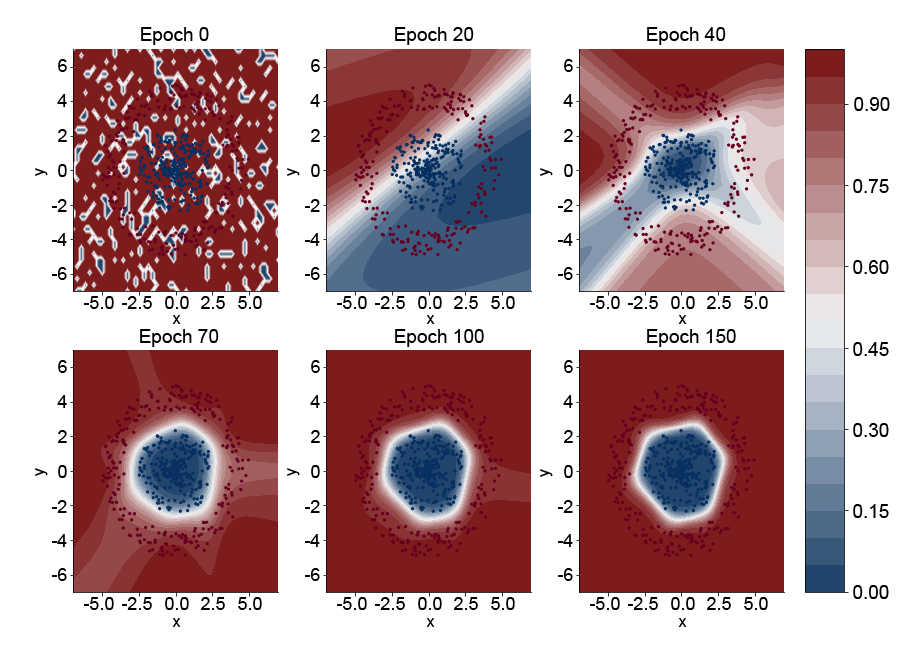
<style>
.page{position:relative;width:910px;height:657px;background:#ffffff}
.page>*{position:absolute;margin:0}
.t1{font:19px "ArialMT";color:#000000}
.t2{font:18px "ArialMT";color:#000000}
.t3{font:16px "ArialMT";color:#000000}
</style>
<div class="page">
<p class="t1" style="left:141px;top:27px;width:68px;height:18px">Epoch 0</p>
<p class="t1" style="left:395px;top:27px;width:79px;height:18px">Epoch 20</p>
<p class="t1" style="left:647px;top:27px;width:79px;height:18px">Epoch 40</p>
<p class="t2" style="left:58px;top:59px;width:9px;height:13px">6</p>
<p class="t2" style="left:311px;top:59px;width:9px;height:13px">6</p>
<p class="t2" style="left:564px;top:59px;width:9px;height:13px">6</p>
<p class="t2" style="left:57px;top:94px;width:10px;height:13px">4</p>
<p class="t2" style="left:310px;top:94px;width:10px;height:13px">4</p>
<p class="t2" style="left:563px;top:94px;width:10px;height:13px">4</p>
<p class="t1" style="left:854px;top:97px;width:36px;height:14px">0.90</p>
<p class="t2" style="left:58px;top:129px;width:9px;height:13px">2</p>
<p class="t2" style="left:311px;top:129px;width:9px;height:13px">2</p>
<p class="t2" style="left:564px;top:129px;width:9px;height:13px">2</p>
<p class="t3" style="left:35px;top:168px;width:13px;height:8px;rotate:-90deg">y</p>
<p class="t2" style="left:58px;top:164px;width:9px;height:13px">0</p>
<p class="t3" style="left:287px;top:168px;width:13px;height:8px;rotate:-90deg">y</p>
<p class="t2" style="left:311px;top:164px;width:9px;height:13px">0</p>
<p class="t3" style="left:540px;top:168px;width:13px;height:8px;rotate:-90deg">y</p>
<p class="t2" style="left:564px;top:164px;width:9px;height:13px">0</p>
<p class="t1" style="left:853px;top:179px;width:36px;height:14px">0.75</p>
<p class="t2" style="left:52px;top:199px;width:15px;height:13px">-2</p>
<p class="t2" style="left:305px;top:199px;width:15px;height:13px">-2</p>
<p class="t2" style="left:558px;top:199px;width:15px;height:13px">-2</p>
<p class="t2" style="left:52px;top:233px;width:15px;height:13px">-4</p>
<p class="t2" style="left:305px;top:233px;width:15px;height:13px">-4</p>
<p class="t2" style="left:558px;top:233px;width:15px;height:13px">-4</p>
<p class="t2" style="left:52px;top:267px;width:15px;height:13px">-6</p>
<p class="t2" style="left:305px;top:267px;width:15px;height:13px">-6</p>
<p class="t2" style="left:558px;top:267px;width:15px;height:13px">-6</p>
<p class="t1" style="left:853px;top:260px;width:36px;height:14px">0.60</p>
<p class="t2" style="left:84px;top:296px;width:30px;height:13px">-5.0</p>
<p class="t2" style="left:122px;top:296px;width:30px;height:13px">-2.5</p>
<p class="t2" style="left:165px;top:296px;width:24px;height:13px">0.0</p>
<p class="t2" style="left:201px;top:296px;width:24px;height:13px">2.5</p>
<p class="t2" style="left:238px;top:296px;width:24px;height:13px">5.0</p>
<p class="t2" style="left:337px;top:296px;width:30px;height:13px">-5.0</p>
<p class="t2" style="left:375px;top:296px;width:30px;height:13px">-2.5</p>
<p class="t2" style="left:418px;top:296px;width:24px;height:13px">0.0</p>
<p class="t2" style="left:454px;top:296px;width:24px;height:13px">2.5</p>
<p class="t2" style="left:491px;top:296px;width:24px;height:13px">5.0</p>
<p class="t2" style="left:590px;top:296px;width:30px;height:13px">-5.0</p>
<p class="t2" style="left:628px;top:296px;width:30px;height:13px">-2.5</p>
<p class="t2" style="left:671px;top:296px;width:24px;height:13px">0.0</p>
<p class="t2" style="left:707px;top:296px;width:24px;height:13px">2.5</p>
<p class="t2" style="left:744px;top:296px;width:24px;height:13px">5.0</p>
<p class="t3" style="left:172px;top:315px;width:9px;height:9px">x</p>
<p class="t3" style="left:426px;top:315px;width:9px;height:9px">x</p>
<p class="t3" style="left:678px;top:315px;width:9px;height:9px">x</p>
<p class="t1" style="left:140px;top:329px;width:79px;height:18px">Epoch 70</p>
<p class="t1" style="left:395px;top:329px;width:89px;height:18px">Epoch 100</p>
<p class="t1" style="left:647px;top:329px;width:89px;height:18px">Epoch 150</p>
<p class="t1" style="left:853px;top:342px;width:36px;height:14px">0.45</p>
<p class="t2" style="left:58px;top:360px;width:9px;height:13px">6</p>
<p class="t2" style="left:311px;top:360px;width:9px;height:13px">6</p>
<p class="t2" style="left:564px;top:360px;width:9px;height:13px">6</p>
<p class="t2" style="left:57px;top:395px;width:10px;height:13px">4</p>
<p class="t2" style="left:310px;top:395px;width:10px;height:13px">4</p>
<p class="t2" style="left:563px;top:395px;width:10px;height:13px">4</p>
<p class="t1" style="left:853px;top:423px;width:36px;height:14px">0.30</p>
<p class="t2" style="left:58px;top:430px;width:9px;height:13px">2</p>
<p class="t2" style="left:311px;top:430px;width:9px;height:13px">2</p>
<p class="t2" style="left:564px;top:430px;width:9px;height:13px">2</p>
<p class="t3" style="left:35px;top:468px;width:13px;height:8px;rotate:-90deg">y</p>
<p class="t2" style="left:58px;top:465px;width:9px;height:13px">0</p>
<p class="t3" style="left:287px;top:468px;width:13px;height:8px;rotate:-90deg">y</p>
<p class="t2" style="left:311px;top:465px;width:9px;height:13px">0</p>
<p class="t3" style="left:540px;top:469px;width:13px;height:8px;rotate:-90deg">y</p>
<p class="t2" style="left:564px;top:465px;width:9px;height:13px">0</p>
<p class="t2" style="left:52px;top:500px;width:15px;height:13px">-2</p>
<p class="t2" style="left:305px;top:500px;width:15px;height:13px">-2</p>
<p class="t2" style="left:558px;top:500px;width:15px;height:13px">-2</p>
<p class="t1" style="left:853px;top:504px;width:36px;height:14px">0.15</p>
<p class="t2" style="left:52px;top:534px;width:15px;height:13px">-4</p>
<p class="t2" style="left:305px;top:534px;width:15px;height:13px">-4</p>
<p class="t2" style="left:558px;top:534px;width:15px;height:13px">-4</p>
<p class="t2" style="left:52px;top:568px;width:15px;height:13px">-6</p>
<p class="t2" style="left:305px;top:568px;width:15px;height:13px">-6</p>
<p class="t2" style="left:558px;top:568px;width:15px;height:13px">-6</p>
<p class="t1" style="left:853px;top:585px;width:36px;height:14px">0.00</p>
<p class="t2" style="left:84px;top:597px;width:30px;height:13px">-5.0</p>
<p class="t2" style="left:122px;top:597px;width:30px;height:13px">-2.5</p>
<p class="t2" style="left:165px;top:597px;width:24px;height:13px">0.0</p>
<p class="t2" style="left:201px;top:597px;width:24px;height:13px">2.5</p>
<p class="t2" style="left:238px;top:597px;width:24px;height:13px">5.0</p>
<p class="t2" style="left:337px;top:597px;width:30px;height:13px">-5.0</p>
<p class="t2" style="left:375px;top:597px;width:30px;height:13px">-2.5</p>
<p class="t2" style="left:418px;top:597px;width:24px;height:13px">0.0</p>
<p class="t2" style="left:454px;top:597px;width:24px;height:13px">2.5</p>
<p class="t2" style="left:491px;top:597px;width:24px;height:13px">5.0</p>
<p class="t2" style="left:590px;top:597px;width:30px;height:13px">-5.0</p>
<p class="t2" style="left:628px;top:597px;width:30px;height:13px">-2.5</p>
<p class="t2" style="left:671px;top:597px;width:24px;height:13px">0.0</p>
<p class="t2" style="left:707px;top:597px;width:24px;height:13px">2.5</p>
<p class="t2" style="left:744px;top:597px;width:24px;height:13px">5.0</p>
<p class="t3" style="left:172px;top:618px;width:9px;height:9px">x</p>
<p class="t3" style="left:426px;top:618px;width:9px;height:9px">x</p>
<p class="t3" style="left:678px;top:618px;width:9px;height:9px">x</p>
</div>
